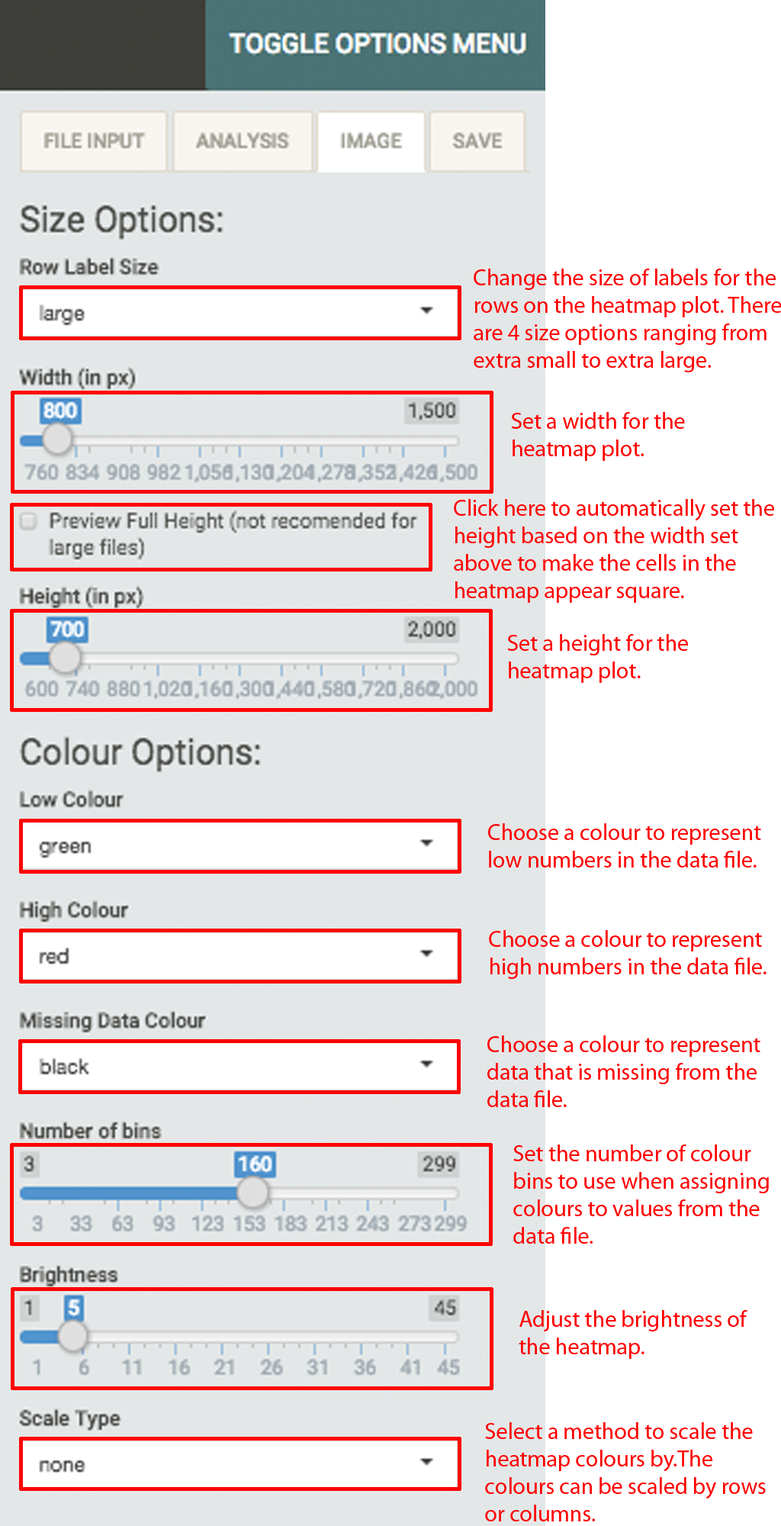
<style>
.page{position:relative;width:781px;height:1526px;background:#ffffff}
.page>*{position:absolute;margin:0}
.t1{font:22.9px "MyriadPro-Regular";color:#ff0000}
</style>
<div class="page">
<p class="t1" style="left:474px;top:269px;width:308px;height:103px">Change the size of labels for the<br>rows on the heatmap plot. There <br>are 4 size options ranging from<br>extra small to extra large.</p>
<p class="t1" style="left:511px;top:412px;width:174px;height:49px">Set a width for the <br>heatmap plot.</p>
<p class="t1" style="left:454px;top:499px;width:320px;height:104px">Click here to automatically set the<br>height based on the width set<br>above to make the cells in the <br>heatmap appear square.</p>
<p class="t1" style="left:507px;top:634px;width:181px;height:49px">Set a height for the <br>heatmap plot.</p>
<p class="t1" style="left:488px;top:823px;width:274px;height:45px">Choose a colour to represent <br>low numbers in the data file.</p>
<p class="t1" style="left:489px;top:930px;width:278px;height:49px">Choose a colour to represent <br>high numbers in the data file.</p>
<p class="t1" style="left:488px;top:1035px;width:273px;height:72px">Choose a colour to represent<br>data that is missing from the <br>data file.</p>
<p class="t1" style="left:514px;top:1145px;width:255px;height:99px">Set the number of colour<br>bins to use when assigning<br>colours to values from the <br>data file.</p>
<p class="t1" style="left:519px;top:1310px;width:229px;height:49px">Adjust the brightness of <br>the heatmap.</p>
<p class="t1" style="left:485px;top:1422px;width:281px;height:100px">Select a method to scale the <br>heatmap colours by.The <br>colours can be scaled by rows<br>or columns.</p>
</div>
